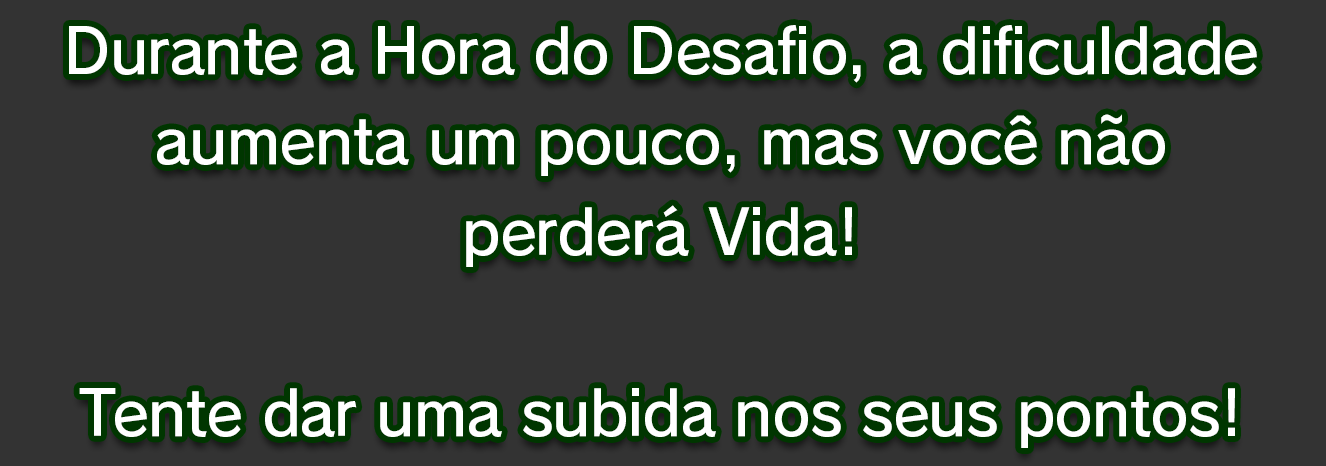
<style>
.page{position:relative;width:1326px;height:466px;background:#333333}
.page>*{position:absolute;margin:0}
.t1{font:61.3px/90.7px "RodinPro-DB";letter-spacing:-0.022em;color:#ffffff}
</style>
<div class="page">
<p class="t1" style="left:69px;top:25px;width:1188px;height:423px;text-align:center">Durante a Hora do Desafio, a dificuldade<br>aumenta um pouco, mas você não<br>perderá Vida!<br><br>Tente dar uma subida nos seus pontos!</p>
</div>
